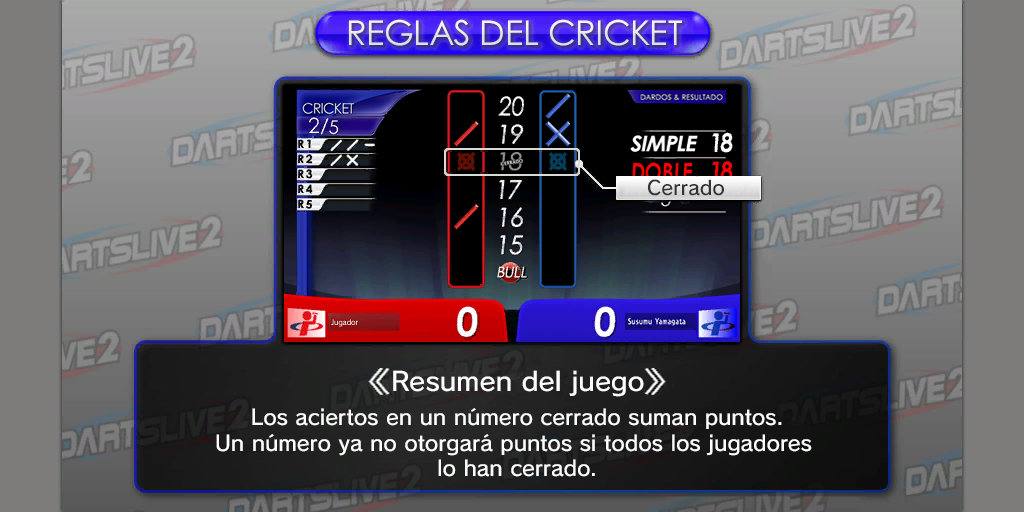
<style>
.page{position:relative;width:1024px;height:512px}
.page>*{position:absolute;margin:0}
.t1{font:34.1px "CenturyGothicPaneuropean";color:#eae9e6}
.t2{font:19.5px "SCEPS3RodinLATIN-Regular";color:#313531}
.t3{font:25.9px "SCEPS3RodinLATIN-Regular";color:#fdfdfd;scale:1.04 1}
.t4{font:21px "SCEPS3RodinLATIN-Regular";color:#fdfdfd}
</style>
<div class="page">
<p class="t1" style="left:349px;top:19px;width:333px;height:27px">REGLAS DEL CRICKET</p>
<p class="t2" style="left:648px;top:179px;width:76px;height:17px">Cerrado</p>
<p class="t3" style="left:393px;top:370px;width:251px;height:27px">Resumen del juego</p>
<p class="t4" style="left:216px;top:408px;width:596px;height:69px;text-align:center">Los aciertos en un número cerrado suman puntos.<br>Un número ya no otorgará puntos si todos los jugadores <br>lo han cerrado.</p>
</div>
